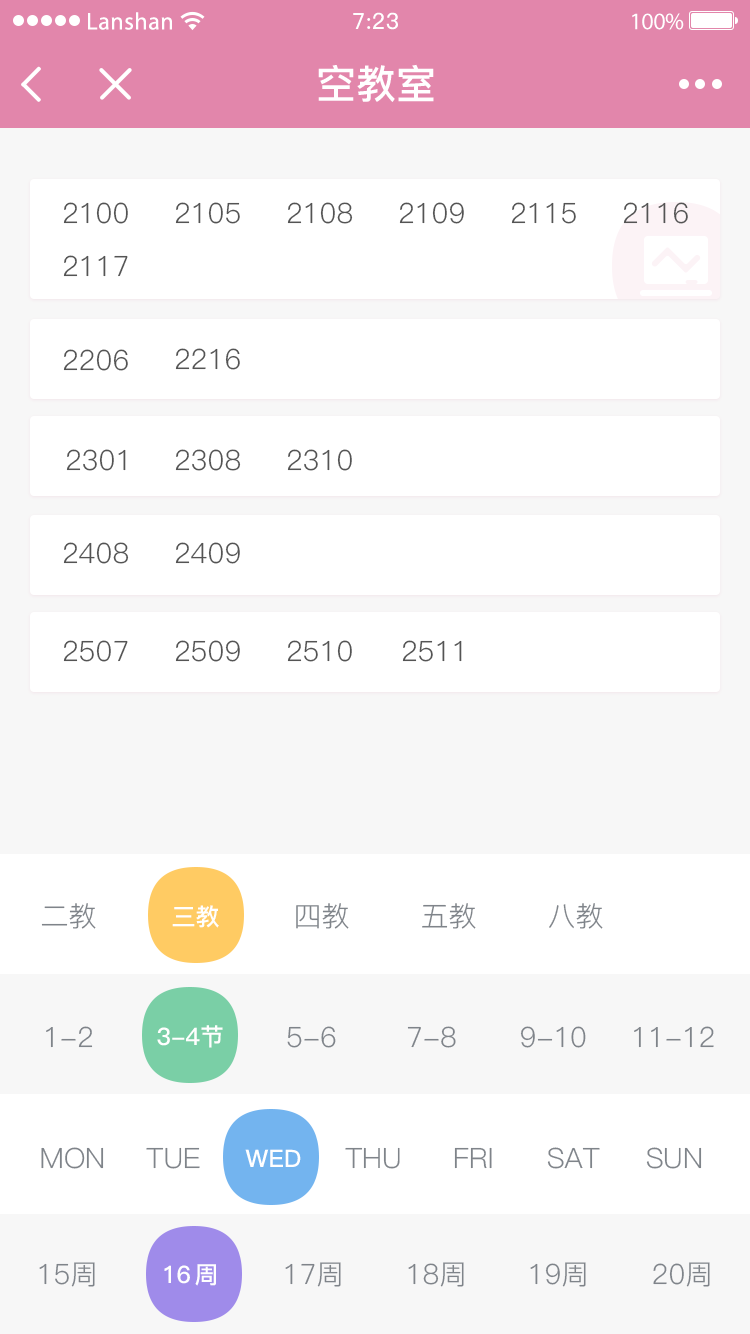
<style>
.page{position:relative;width:750px;height:1334px;background:#ffffff}
.page>*{position:absolute;margin:0}
.t1{font:28px "PingFang-SC-Regular";color:#545454}
.t2{font:28px "PingFang-SC-Regular";color:#7f848a}
.t3{font:24px "PingFang-SC-Bold";color:#ffffff}
</style>
<div class="page">
<p class="t1" style="left:63px;top:202px;width:65px;height:22px">2100</p>
<p class="t1" style="left:175px;top:202px;width:65px;height:22px">2105</p>
<p class="t1" style="left:287px;top:202px;width:66px;height:22px">2108</p>
<p class="t1" style="left:399px;top:202px;width:65px;height:22px">2109</p>
<p class="t1" style="left:511px;top:202px;width:65px;height:22px">2115</p>
<p class="t1" style="left:623px;top:202px;width:65px;height:22px">2116</p>
<p class="t1" style="left:63px;top:255px;width:65px;height:22px">2117</p>
<p class="t1" style="left:63px;top:349px;width:65px;height:22px">2206</p>
<p class="t1" style="left:175px;top:348px;width:65px;height:22px">2216</p>
<p class="t1" style="left:66px;top:449px;width:60px;height:22px">2301</p>
<p class="t1" style="left:175px;top:449px;width:66px;height:22px">2308</p>
<p class="t1" style="left:287px;top:449px;width:65px;height:22px">2310</p>
<p class="t1" style="left:63px;top:542px;width:66px;height:22px">2408</p>
<p class="t1" style="left:175px;top:542px;width:65px;height:22px">2409</p>
<p class="t1" style="left:63px;top:640px;width:65px;height:22px">2507</p>
<p class="t1" style="left:175px;top:640px;width:65px;height:22px">2509</p>
<p class="t1" style="left:287px;top:640px;width:65px;height:22px">2510</p>
<p class="t1" style="left:402px;top:640px;width:60px;height:22px">2511</p>
<p class="t2" style="left:41px;top:903px;width:55px;height:26px">二教</p>
<p class="t3" style="left:172px;top:905px;width:47px;height:23px">三教</p>
<p class="t2" style="left:296px;top:903px;width:53px;height:26px">四教</p>
<p class="t2" style="left:422px;top:903px;width:54px;height:26px">五教</p>
<p class="t2" style="left:549px;top:903px;width:54px;height:26px">八教</p>
<p class="t3" style="left:157px;top:1025px;width:66px;height:23px">3-4节</p>
<p class="t2" style="left:46px;top:1026px;width:47px;height:22px">1-2</p>
<p class="t2" style="left:287px;top:1026px;width:49px;height:22px">5-6</p>
<p class="t2" style="left:407px;top:1026px;width:49px;height:22px">7-8</p>
<p class="t2" style="left:520px;top:1026px;width:66px;height:22px">9-10</p>
<p class="t2" style="left:634px;top:1026px;width:80px;height:22px">11-12</p>
<p class="t2" style="left:41px;top:1147px;width:63px;height:22px">MON</p>
<p class="t2" style="left:146px;top:1147px;width:54px;height:22px">TUE</p>
<p class="t3" style="left:245px;top:1149px;width:56px;height:18px">WED</p>
<p class="t2" style="left:345px;top:1147px;width:55px;height:22px">THU</p>
<p class="t2" style="left:454px;top:1147px;width:38px;height:22px">FRI</p>
<p class="t2" style="left:547px;top:1147px;width:53px;height:22px">SAT</p>
<p class="t2" style="left:646px;top:1147px;width:56px;height:22px">SUN</p>
<p class="t2" style="left:39px;top:1262px;width:56px;height:25px">15周</p>
<p class="t3" style="left:164px;top:1264px;width:52px;height:22px">16 周</p>
<p class="t2" style="left:285px;top:1262px;width:56px;height:25px">17周</p>
<p class="t2" style="left:408px;top:1262px;width:56px;height:25px">18周</p>
<p class="t2" style="left:530px;top:1262px;width:56px;height:25px">19周</p>
<p class="t2" style="left:653px;top:1262px;width:57px;height:25px">20周</p>
</div>
